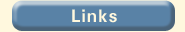
<style>
.page{position:relative;width:185px;height:32px;background:#5982a6}
.page>*{position:absolute;margin:0}
.t1{font:18px "Univers-Bold";letter-spacing:0.05em;color:#fff8de}
</style>
<div class="page">
<p class="t1" style="left:72px;top:9px;width:45px;height:14px">Links</p>
</div>
